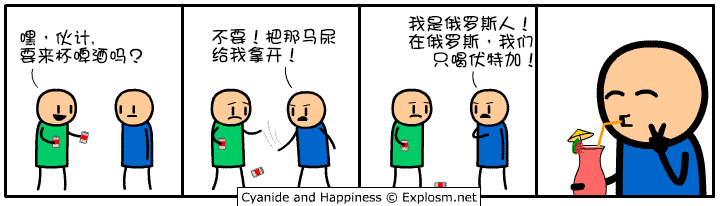
<style>
.page{position:relative;width:720px;height:206px;background:#ffffff}
.page>*{position:absolute;margin:0}
.t1{font:18px/18px "DFGirl";color:#000000}
</style>
<div class="page">
<p class="t1" style="left:408px;top:15px;width:125px;height:53px">我是俄罗斯人！<br>在俄罗斯，我们<br>    只喝伏特加！</p>
<p class="t1" style="left:20px;top:29px;width:123px;height:35px">嘿，伙计,<br>要来杯啤酒吗？</p>
<p class="t1" style="left:212px;top:28px;width:124px;height:35px">不要！把那马尿<br>给我拿开！</p>
</div>
